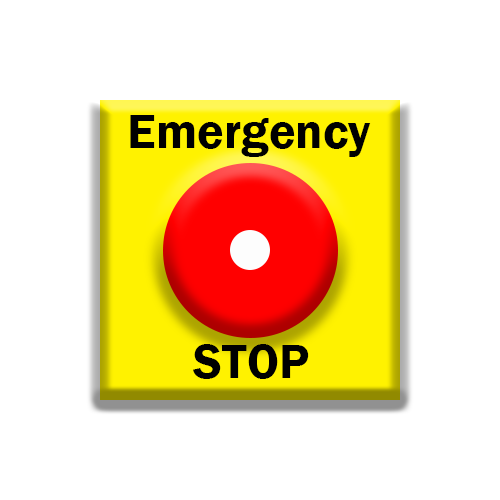
<style>
.page{position:relative;width:500px;height:500px;background:#ffffff}
.page>*{position:absolute;margin:0}
.t1{font:50px "FranklinGothic-Demi";color:#000000}
</style>
<div class="page">
<p class="t1" style="left:130px;top:115px;width:241px;height:42px">Emergency</p>
<p class="t1" style="left:193px;top:344px;width:116px;height:35px">STOP</p>
</div>
